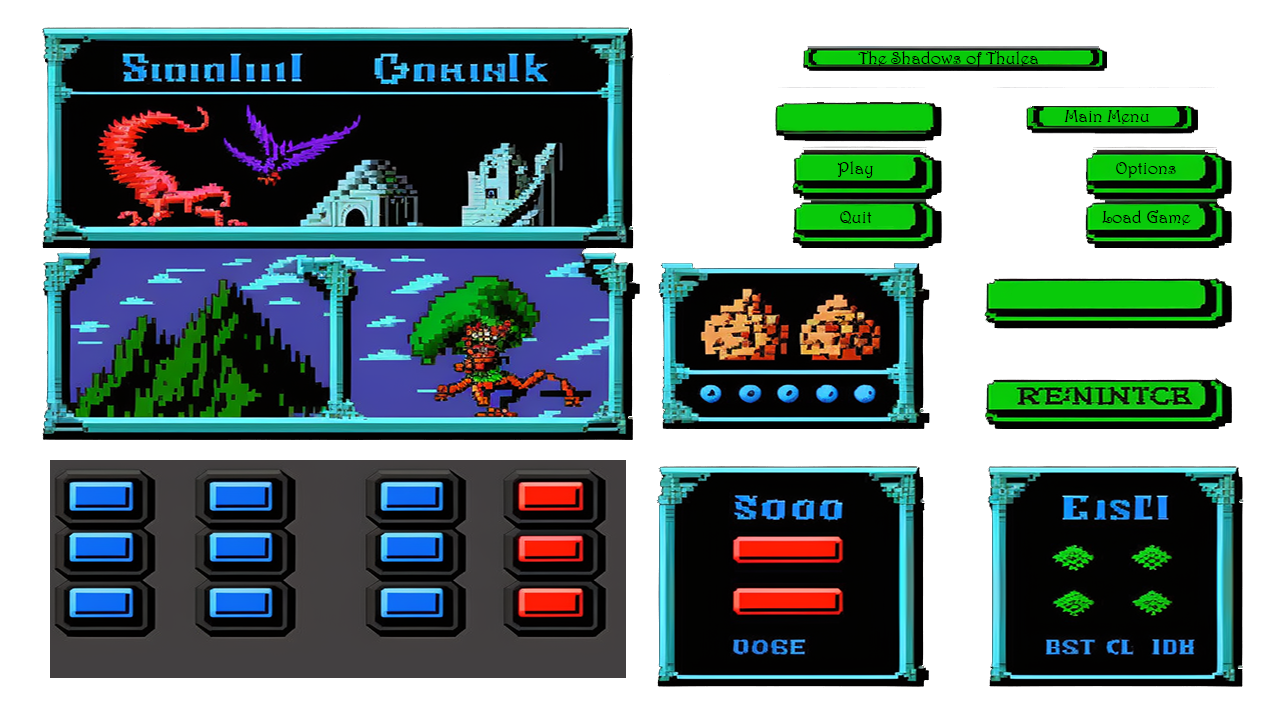
<style>
.page{position:relative;width:1280px;height:720px;background:#ffffff}
.page>*{position:absolute;margin:0}
.t1{font:18px "Harrington";color:#000000}
</style>
<div class="page">
<p class="t1" style="left:858px;top:51px;width:180px;height:17px">The Shadows of Thulea</p>
<p class="t1" style="left:1064px;top:110px;width:85px;height:14px">Main Menu</p>
<p class="t1" style="left:837px;top:161px;width:36px;height:17px">Play</p>
<p class="t1" style="left:1116px;top:162px;width:60px;height:16px">Options</p>
<p class="t1" style="left:840px;top:211px;width:32px;height:13px">Quit</p>
<p class="t1" style="left:1102px;top:210px;width:89px;height:15px">Load Game</p>
</div>
